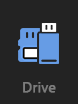
<style>
.page{position:relative;width:78px;height:104px;background:#232323}
.page>*{position:absolute;margin:0}
.t1{font:14px "SegoeUI";color:#7c7c7c;font-weight:bold}
</style>
<div class="page">
<p class="t1" style="left:23px;top:82px;width:33px;height:11px">Drive</p>
</div>
